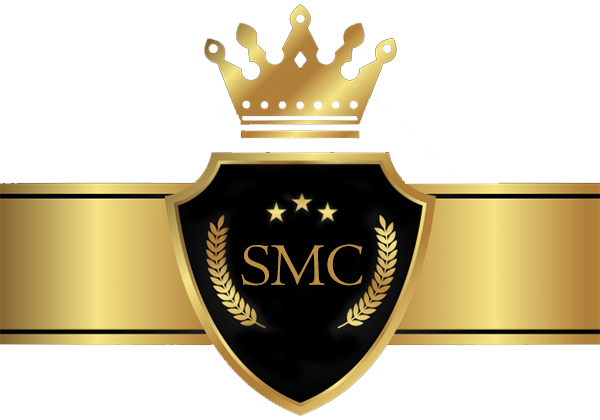
<style>
.page{position:relative;width:600px;height:420px;background:#ffffff}
.page>*{position:absolute;margin:0}
.t1{font:62.5px "Centaur";color:#b98f45}
</style>
<div class="page">
<p class="t1" style="left:241px;top:244px;width:122px;height:42px">SMC</p>
</div>
